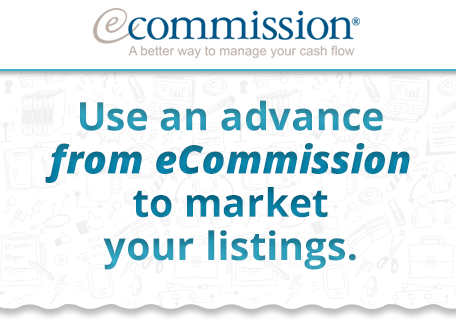
<style>
.page{position:relative;width:456px;height:334px;background:#ffffff}
.page>*{position:absolute;margin:0}
.t1{font:39.2px/43.2px "OpenSans-Bold"}
.t2{font:39.2px/43.2px "OpenSans-ExtraboldItalic"}
</style>
<div class="page">
<p class="t1" style="left:45px;top:100px;width:365px;height:170px;text-align:center">Use an advance<br><span class="t2">from eCommission<br></span>to market<br>your listings.</p>
</div>
